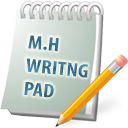
<style>
.page{position:relative;width:128px;height:128px;background:#ffffff}
.page>*{position:absolute;margin:0}
.t1{font:19.5px "MyriadPro-BoldCond";color:#3b7492;scale:1.16 1}
</style>
<div class="page">
<p class="t1" style="left:24px;top:35px;width:64px;height:63px;rotate:6deg">M.H<br>WRITNG<br>PAD</p>
</div>
